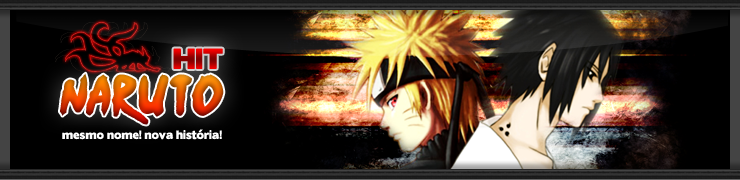
<style>
.page{position:relative;width:740px;height:180px}
.page>*{position:absolute;margin:0}
.t1{font:26px "BorisBlackBloxx"}
.t2{font:46px "Ninja-Naruto"}
.t3{font:11px "BorisBlackBloxx";color:#ffffff}
</style>
<div class="page">
<p class="t1" style="left:173px;top:48px;width:50px;height:21px">HIT</p>
<p class="t2" style="left:60px;top:73px;width:164px;height:52px">naruto</p>
<p class="t3" style="left:62px;top:129px;width:160px;height:11px">mesmo nome! nova história!</p>
</div>
